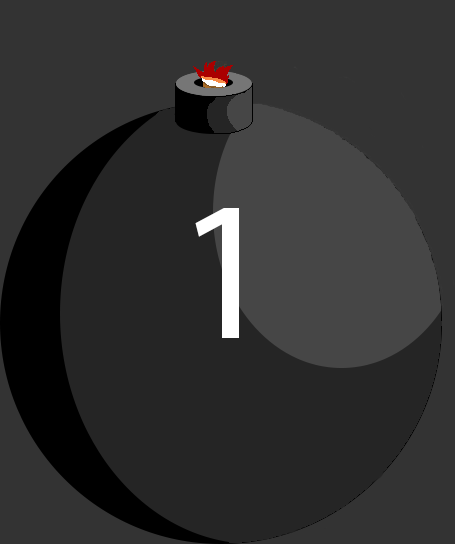
<style>
.page{position:relative;width:455px;height:544px;background:#333333}
.page>*{position:absolute;margin:0}
.t1{font:200px "MyriadPro-Regular";color:#ffffff}
</style>
<div class="page">
<p class="t1" style="left:195px;top:208px;width:44px;height:130px">1</p>
</div>
